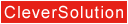
<style>
.page{position:relative;width:128px;height:24px;background:#e62117}
.page>*{position:absolute;margin:0}
.t1{font:16.5px "ArialMT";letter-spacing:0.06em;color:#ffffff}
</style>
<div class="page">
<p class="t1" style="left:4px;top:5px;width:119px;height:14px">CleverSolution</p>
</div>
